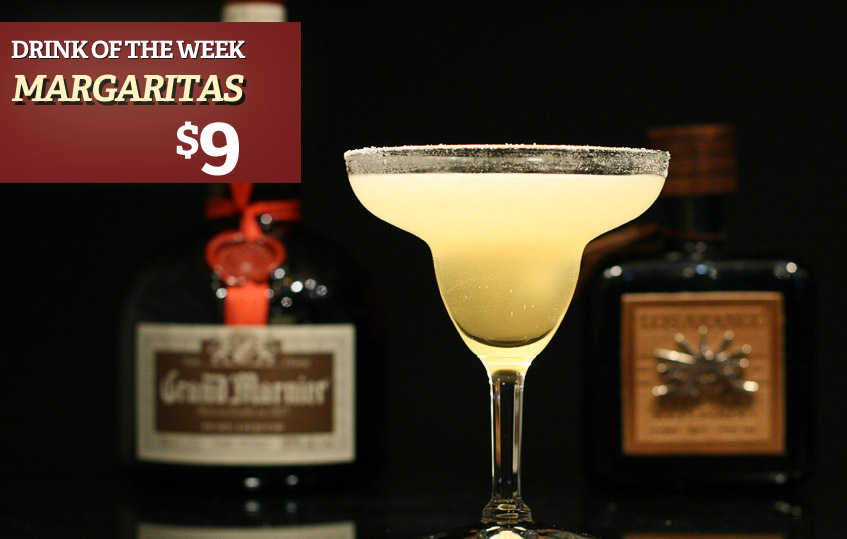
<style>
.page{position:relative;width:847px;height:539px}
.page>*{position:absolute;margin:0}
.t1{font:24px "AdelleBasic-Bold";letter-spacing:-0.05em;color:#ffffff}
.t2{font:36px "AdelleBasic-BoldItalic";letter-spacing:-0.05em;color:#fff4c2}
.t3{font:47.4px "AdelleBasic-Bold";letter-spacing:-0.05em;color:#ffffff}
.t4{font:79.1px "AdelleBasic-Bold";letter-spacing:-0.05em;color:#ffffff}
</style>
<div class="page">
<p class="t1" style="left:11px;top:40px;width:235px;height:19px">DRINK OF THE WEEK</p>
<p class="t2" style="left:11px;top:74px;width:233px;height:28px">MARGARITAS</p>
<p class="t3" style="left:176px;top:121px;width:63px;height:55px">$<span class="t4">9</span></p>
</div>
